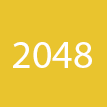
<style>
.page{position:relative;width:107px;height:107px;background:#e9c42e}
.page>*{position:absolute;margin:0}
.t1{font:40px "MyriadPro-Regular";color:#ffffff}
</style>
<div class="page">
<p class="t1" style="left:13px;top:42px;width:79px;height:26px">2048</p>
</div>
